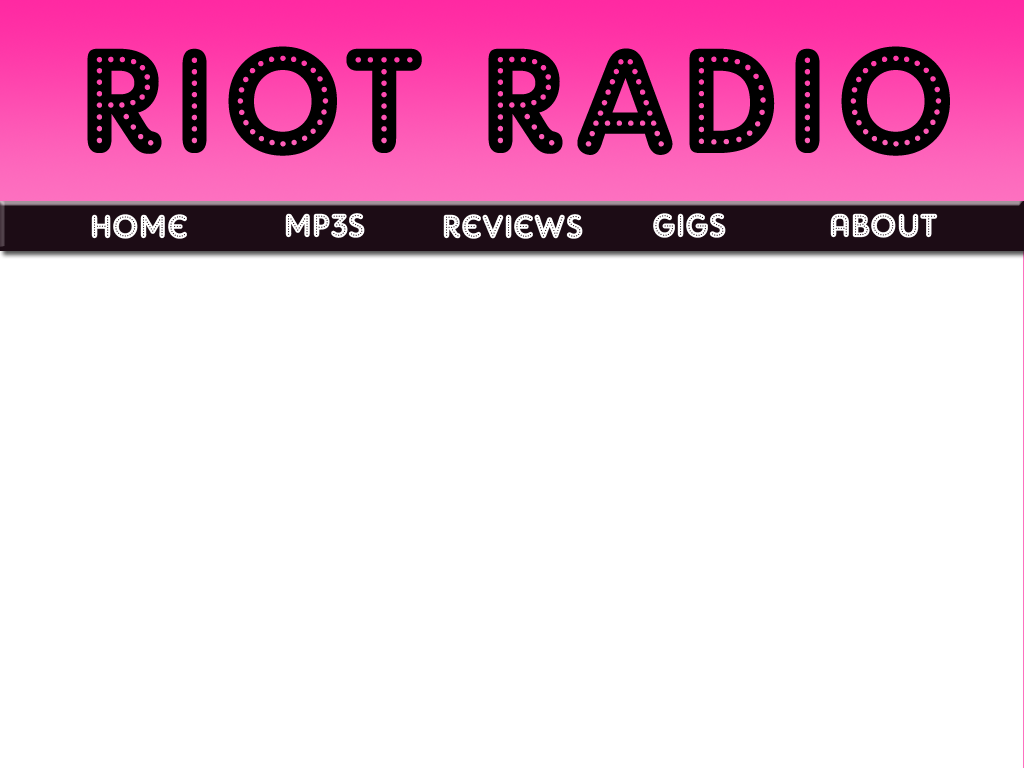
<style>
.page{position:relative;width:1024px;height:768px;background:#ffffff}
.page>*{position:absolute;margin:0}
.t1{font:150px "AdamGorry-Lights";letter-spacing:0.06em;color:#000000}
.t2{font:33.3px "AdamGorry-Lights";color:#ffffff}
</style>
<div class="page">
<p class="t1" style="left:87px;top:46px;width:863px;height:110px">Riot Radio</p>
<p class="t2" style="left:91px;top:214px;width:96px;height:25px">Home</p>
<p class="t2" style="left:285px;top:213px;width:80px;height:25px">Mp3s</p>
<p class="t2" style="left:443px;top:214px;width:140px;height:25px">Reviews</p>
<p class="t2" style="left:653px;top:213px;width:73px;height:25px">gigs</p>
<p class="t2" style="left:830px;top:213px;width:108px;height:25px">About</p>
</div>
